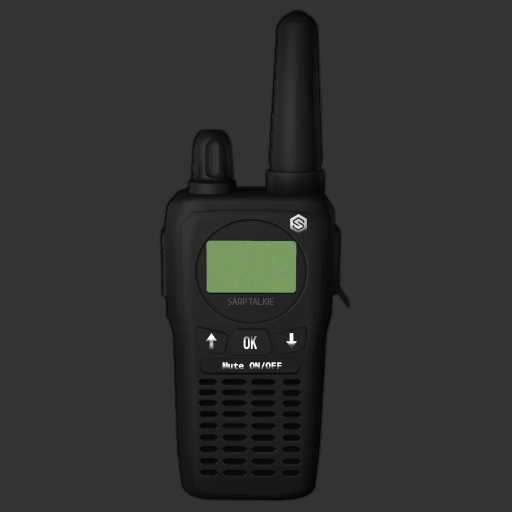
<style>
.page{position:relative;width:512px;height:512px;background:#333333}
.page>*{position:absolute;margin:0}
.t1{font:9px "MyriadPro-Regular";color:#4a4a4a}
.t2{font:9px "DroidSansMonoW02-Bold"}
</style>
<div class="page">
<p class="t1" style="left:227px;top:298px;width:47px;height:7px">SARP TALKIE</p>
<p class="t2" style="left:222px;top:362px;width:60px;height:8px">Mute ON/OFF</p>
</div>
